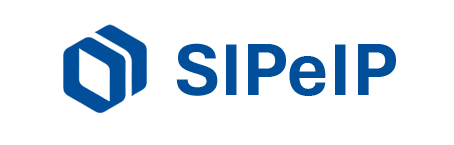
<style>
.page{position:relative;width:454px;height:145px;background:#ffffff}
.page>*{position:absolute;margin:0}
.t1{font:77.1px "Aptos-Bold";color:#014f9a}
</style>
<div class="page">
<p class="t1" style="left:176px;top:43px;width:220px;height:53px">SIPeIP</p>
</div>
